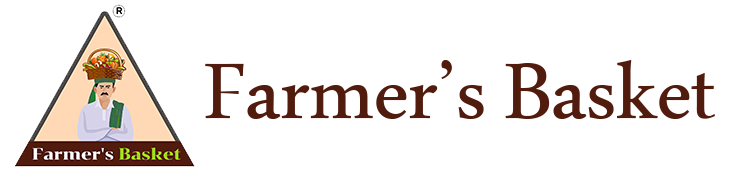
<style>
.page{position:relative;width:738px;height:177px;background:#ffffff}
.page>*{position:absolute;margin:0}
.t1{font:116px "MicrosoftUighur";color:#511c0e}
</style>
<div class="page">
<p class="t1" style="left:205px;top:60px;width:510px;height:59px">Farmer’s Basket</p>
</div>
